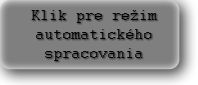
<style>
.page{position:relative;width:198px;height:85px;background:#7f7f7f}
.page>*{position:absolute;margin:0}
.t1{font:16px "Courier";color:#000000}
</style>
<div class="page">
<p class="t1" style="left:31px;top:10px;width:126px;height:51px;text-align:center">Klik pre režim automatického spracovania</p>
</div>
